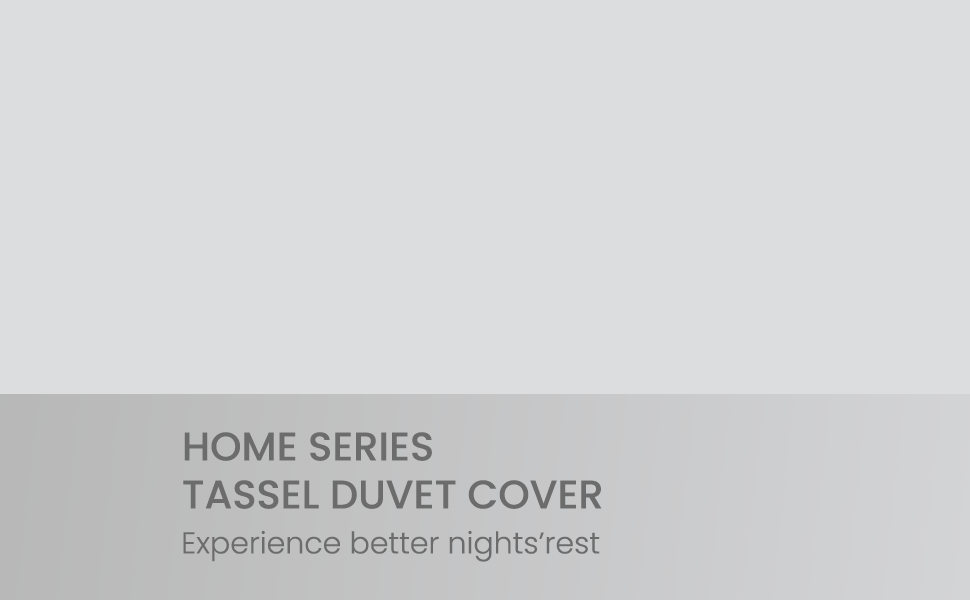
<style>
.page{position:relative;width:970px;height:600px;background:#dcdddf}
.page>*{position:absolute;margin:0}
.t1{font:40px "Poppins-Medium";color:#6c6c6c;text-transform:uppercase}
.t2{font:30px "Poppins-Light";color:#6c6c6c}
</style>
<div class="page">
<p class="t1" style="left:183px;top:432px;width:419px;height:77px">HOME SERIES<br>TASSEL DUVET COVER</p>
<p class="t2" style="left:183px;top:530px;width:417px;height:32px">Experience better nights’rest</p>
</div>
